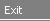
<style>
.page{position:relative;width:50px;height:21px;background:#808080}
.page>*{position:absolute;margin:0}
.t1{font:11px "Tahoma";color:#ffffff}
</style>
<div class="page">
<p class="t1" style="left:5px;top:6px;width:17px;height:8px">Exit</p>
</div>
